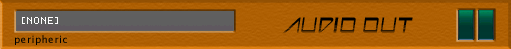
<style>
.page{position:relative;width:511px;height:49px}
.page>*{position:absolute;margin:0}
.t1{font:24px "AstronBoyVideo";letter-spacing:0.05em;color:#000000}
.t2{font:10px "LucidaSansUnicode";letter-spacing:0.05em;color:#000000}
</style>
<div class="page">
<p class="t1" style="left:283px;top:17px;width:130px;height:16px">AUDIO OUT</p>
<p class="t2" style="left:15px;top:35px;width:52px;height:10px">peripheric</p>
</div>
